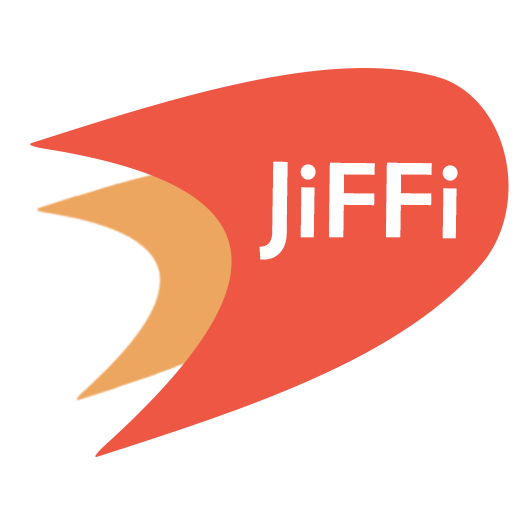
<style>
.page{position:relative;width:522px;height:522px;background:#ffffff}
.page>*{position:absolute;margin:0}
.t1{font:108.8px "GillSans-SemiBold";color:#fefefe}
</style>
<div class="page">
<p class="t1" style="left:259px;top:161px;width:199px;height:99px;rotate:1deg">JiFFi</p>
</div>
